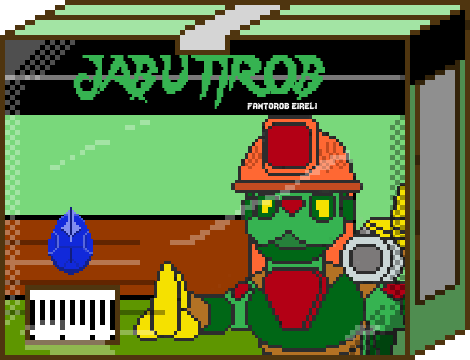
<style>
.page{position:relative;width:470px;height:360px}
.page>*{position:absolute;margin:0}
.t1{font:48px "Lady-Radical";color:#36b351;scale:0.72 1}
.t2{font:12px "Lady-Radical";color:#fbfbfb}
</style>
<div class="page">
<p class="t1" style="left:73px;top:55px;width:252px;height:54px">JABUTIROB</p>
<p class="t2" style="left:247px;top:102px;width:70px;height:8px">fantorob eireli</p>
</div>
